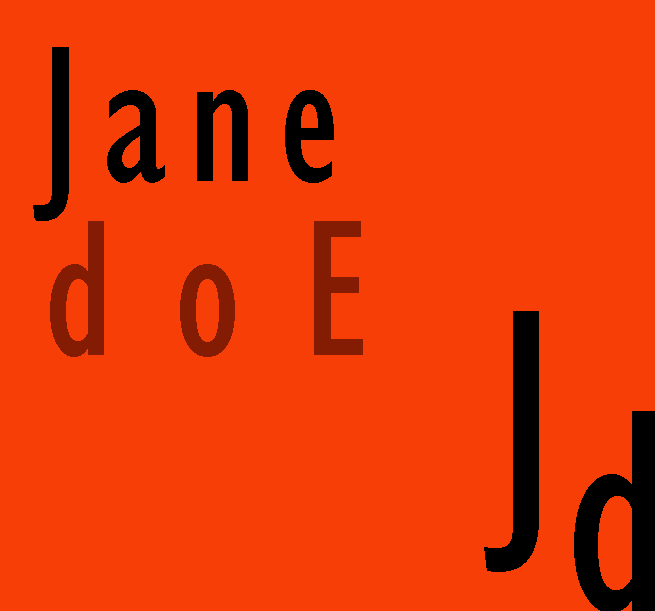
<style>
.page{position:relative;width:655px;height:611px;background:#f63e06}
.page>*{position:absolute;margin:0}
.t1{font:200px "GillSansMT-Condensed";letter-spacing:0.1em;color:#000000}
.t2{font:200px "GillSansMT-Condensed";letter-spacing:0.3em;color:#831c02}
.t3{font:300px "GillSansMT-Condensed";letter-spacing:0.1em;color:#000000}
</style>
<div class="page">
<p class="t1" style="left:33px;top:47px;width:301px;height:174px">Jane</p>
<p class="t2" style="left:50px;top:221px;width:313px;height:136px">doE</p>
<p class="t3" style="left:484px;top:311px;width:55px;height:261px">J</p>
<p class="t3" style="left:574px;top:411px;width:81px;height:202px">d</p>
</div>
